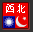
<style>
.page{position:relative;width:33px;height:32px;background:#333333}
.page>*{position:absolute;margin:0}
.t1{font:10.4px "SimSun";color:#ffffff}
</style>
<div class="page">
<p class="t1" style="left:6px;top:4px;width:19px;height:9px">西北</p>
</div>
